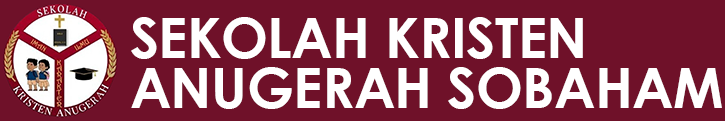
<style>
.page{position:relative;width:725px;height:121px;background:#6f1129}
.page>*{position:absolute;margin:0}
.t1{font:56px/50px "CenturyGothic-Bold";letter-spacing:-0.01em;color:#ffffff}
</style>
<div class="page">
<p class="t1" style="left:131px;top:17px;width:591px;height:92px">SEKOLAH KRISTEN<br>ANUGERAH SOBAHAM</p>
</div>
